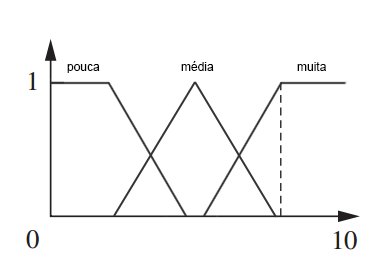
<style>
.page{position:relative;width:386px;height:270px;background:#ffffff}
.page>*{position:absolute;margin:0}
.t1{font:12px "ArialMT";color:#000000}
</style>
<div class="page">
<p class="t1" style="left:67px;top:64px;width:33px;height:9px">pouca</p>
<p class="t1" style="left:181px;top:61px;width:33px;height:10px">média</p>
<p class="t1" style="left:297px;top:62px;width:29px;height:9px">muita</p>
</div>
